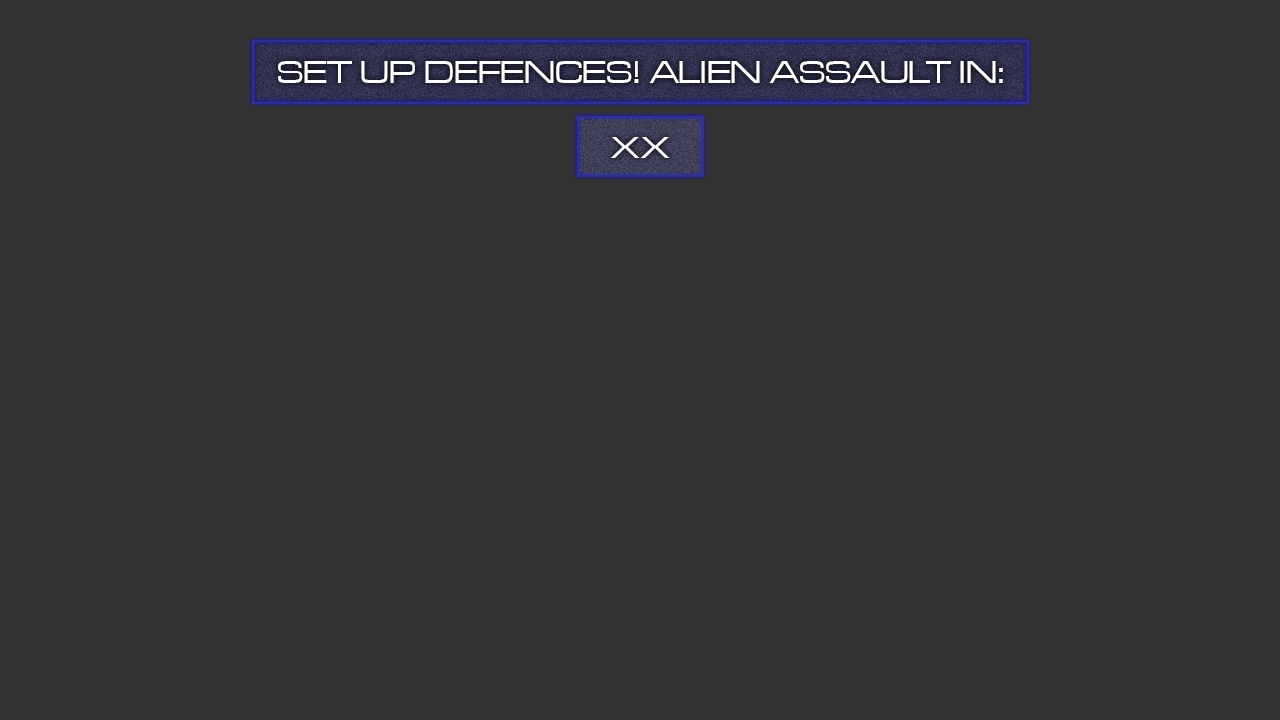
<style>
.page{position:relative;width:1280px;height:720px;background:#333333}
.page>*{position:absolute;margin:0}
.t1{font:33px "MicrogrammaD-MediExte";color:#ffffff;text-transform:uppercase}
.t2{font:32px "MicrogrammaD-MediExte";letter-spacing:0.06em;color:#ffffff;text-transform:uppercase}
</style>
<div class="page">
<p class="t1" style="left:278px;top:61px;width:725px;height:22px">Set up defences! ALien Assault in:</p>
<p class="t2" style="left:610px;top:137px;width:60px;height:21px">XX</p>
</div>
